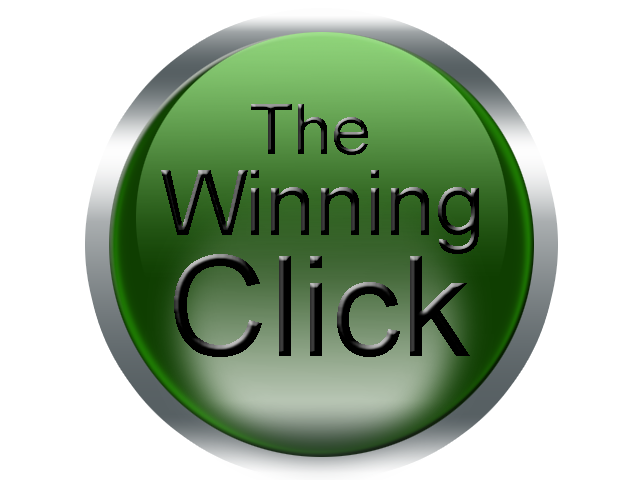
<style>
.page{position:relative;width:640px;height:480px;background:#ffffff}
.page>*{position:absolute;margin:0}
.t1{font:70px "ArialMT"}
.t2{font:90px "ArialMT";color:#000000}
.t3{font:140px "ArialMT";color:#000000}
</style>
<div class="page">
<p class="t1" style="left:251px;top:104px;width:117px;height:51px">The</p>
<p class="t2" style="left:161px;top:170px;width:318px;height:84px">Winning</p>
<p class="t3" style="left:174px;top:254px;width:296px;height:103px">Click</p>
</div>
